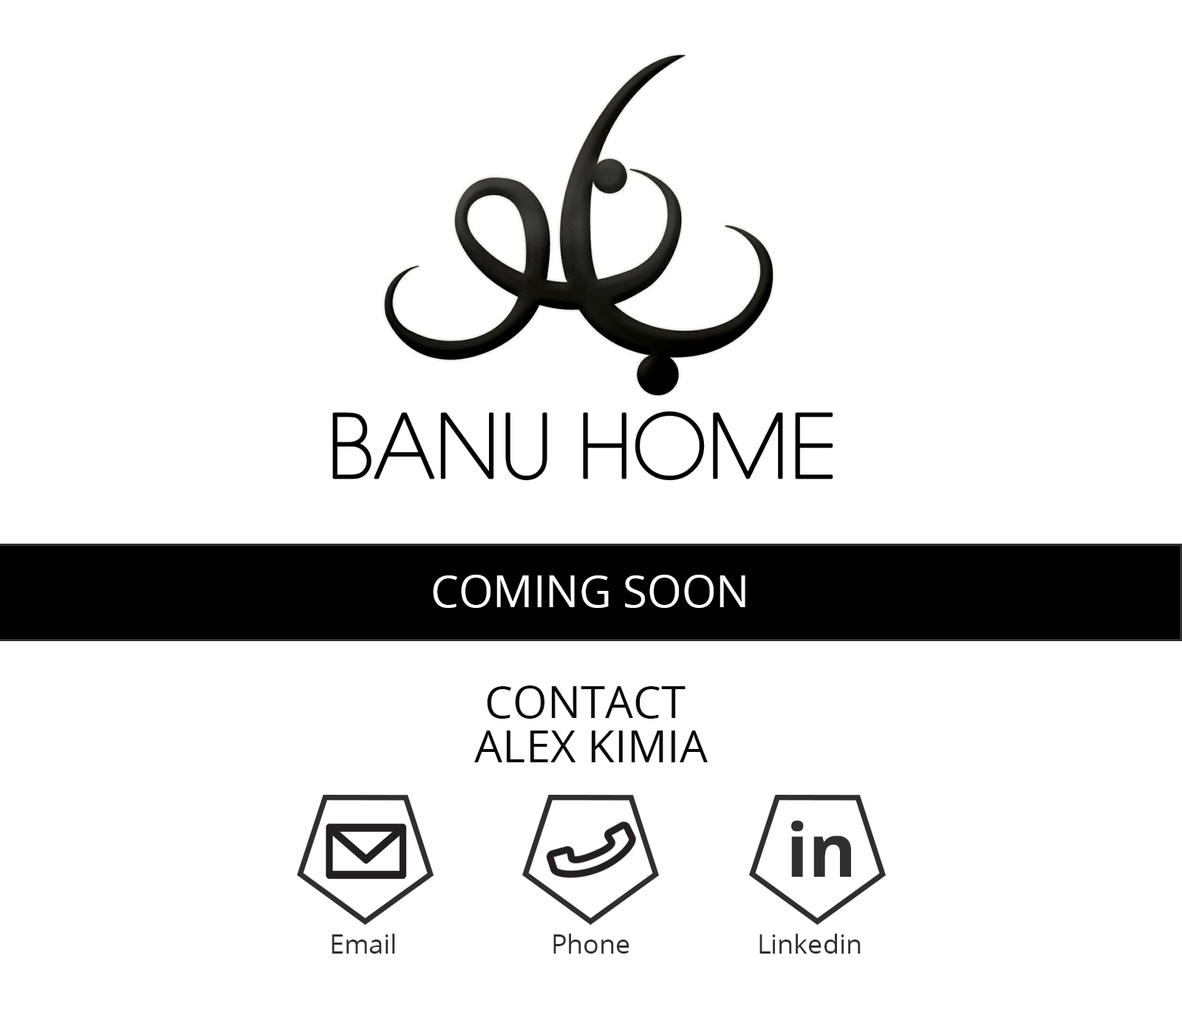
<style>
.page{position:relative;width:1182px;height:1009px;background:#ffffff}
.page>*{position:absolute;margin:0}
.t1{font:44.3px "OpenSans";color:#ffffff}
.t2{font:44.3px/44.3px "OpenSans";color:#0a0a0a}
.t3{font:73.9px "OpenSans-Bold";color:#2f2f2f}
.t4{font:26.6px "OpenSans";color:#2f2f2f}
</style>
<div class="page">
<p class="t1" style="left:433px;top:575px;width:312px;height:33px">COMING SOON</p>
<p class="t2" style="left:474px;top:685px;width:234px;height:77px;text-align:center">CONTACT <br>ALEX KIMIA</p>
<p class="t3" style="left:791px;top:821px;width:60px;height:56px">in</p>
<p class="t4" style="left:332px;top:934px;width:62px;height:20px">Email</p>
<p class="t4" style="left:553px;top:934px;width:76px;height:20px">Phone</p>
<p class="t4" style="left:759px;top:934px;width:102px;height:20px">Linkedin</p>
</div>
